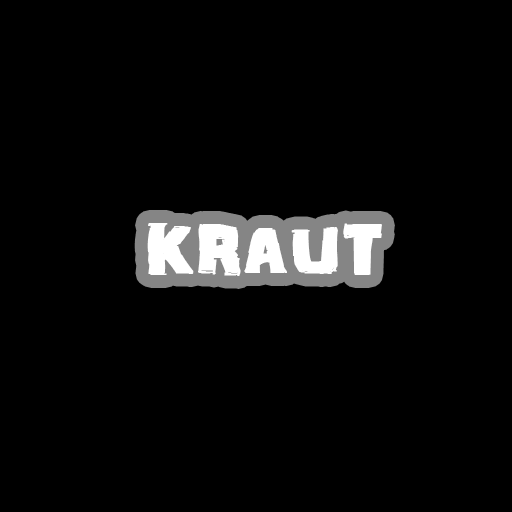
<style>
.page{position:relative;width:512px;height:512px;background:#000000}
.page>*{position:absolute;margin:0}
.t1{font:69.9px "ARDARLING";color:#ffffff;font-weight:bold}
</style>
<div class="page">
<p class="t1" style="left:147px;top:223px;width:235px;height:53px">KRAUT</p>
</div>
